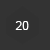
<style>
.page{position:relative;width:50px;height:50px;background:#333333}
.page>*{position:absolute;margin:0}
.t1{font:12px "ArialMT";color:#ffffff}
</style>
<div class="page">
<p class="t1" style="left:15px;top:21px;width:14px;height:9px">20</p>
</div>
